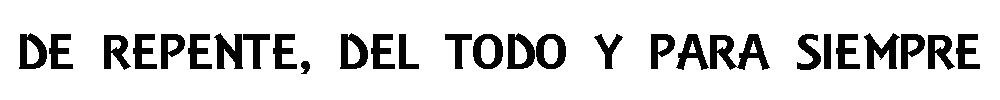
<style>
.page{position:relative;width:1000px;height:100px;background:#ffffff}
.page>*{position:absolute;margin:0}
.t1{font:52.7px "ARESSENCE";color:#040404;scale:1.15 1}
</style>
<div class="page">
<p class="t1" style="left:19px;top:33px;width:961px;height:41px">DE REPENTE, DEL TODO Y PARA SIEMPRE</p>
</div>
